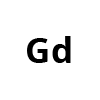
<style>
.page{position:relative;width:100px;height:100px;background:#ffffff}
.page>*{position:absolute;margin:0}
.t1{font:35px "OpenSans-Bold";color:#000000}
</style>
<div class="page">
<p class="t1" style="left:27px;top:36px;width:44px;height:27px">Gd</p>
</div>
